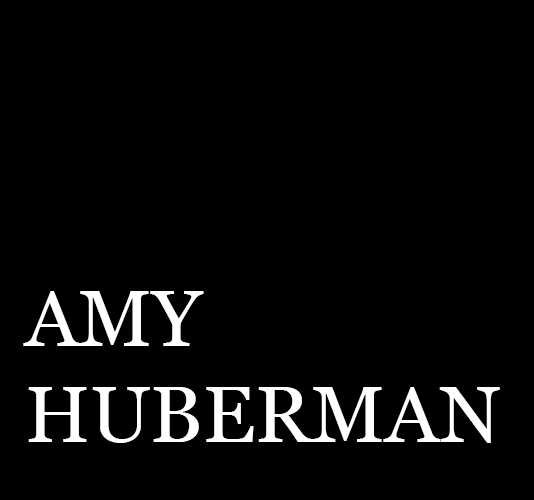
<style>
.page{position:relative;width:534px;height:500px;background:#000000}
.page>*{position:absolute;margin:0}
.t1{font:80px "Georgia";color:#ffffff}
</style>
<div class="page">
<p class="t1" style="left:23px;top:291px;width:477px;height:152px">AMY<br>HUBERMAN</p>
</div>
